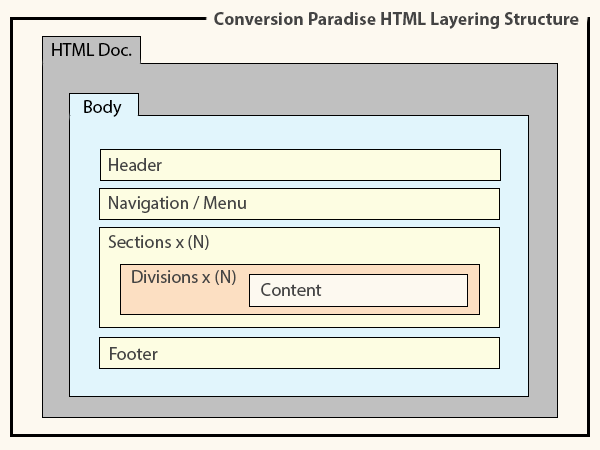
<style>
.page{position:relative;width:600px;height:450px;background:#fdf9f0}
.page>*{position:absolute;margin:0}
.t1{font:18px "MyriadPro-Bold";color:#444444}
.t2{font:18px "MyriadPro-Regular";color:#000000}
.t3{font:18px "MyriadPro-Regular";color:#444444}
</style>
<div class="page">
<p class="t1" style="left:214px;top:12px;width:365px;height:17px">Conversion Paradise HTML Layering Structure</p>
<p class="t2" style="left:52px;top:43px;width:80px;height:13px">HTML Doc.</p>
<p class="t2" style="left:84px;top:100px;width:38px;height:17px">Body</p>
<p class="t3" style="left:109px;top:158px;width:53px;height:13px">Header</p>
<p class="t3" style="left:109px;top:196px;width:137px;height:17px">Navigation / Menu</p>
<p class="t3" style="left:108px;top:235px;width:101px;height:15px">Sections x (N)</p>
<p class="t3" style="left:132px;top:270px;width:104px;height:15px">Divisions x (N)</p>
<p class="t3" style="left:261px;top:283px;width:61px;height:13px">Content</p>
<p class="t3" style="left:110px;top:347px;width:48px;height:13px">Footer</p>
</div>
